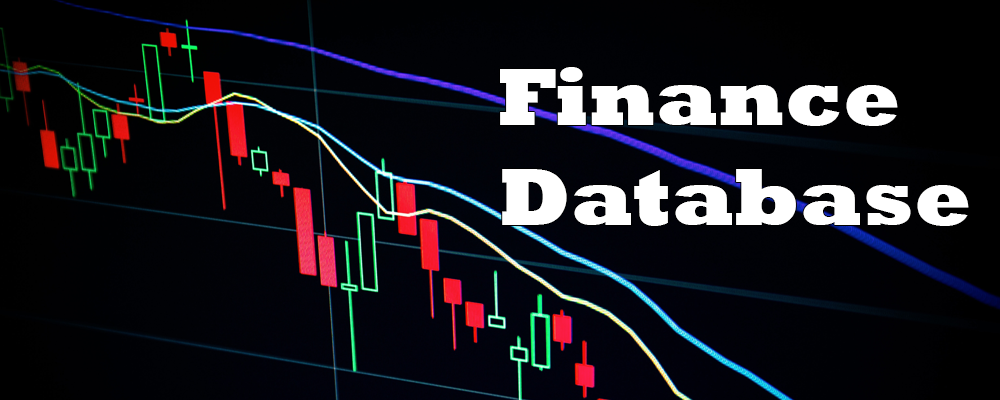
<style>
.page{position:relative;width:1000px;height:400px}
.page>*{position:absolute;margin:0}
.t1{font:83.3px "Rockwell-ExtraBold";color:#ffffff}
</style>
<div class="page">
<p class="t1" style="left:500px;top:67px;width:469px;height:159px">Finance <br>Database</p>
</div>
